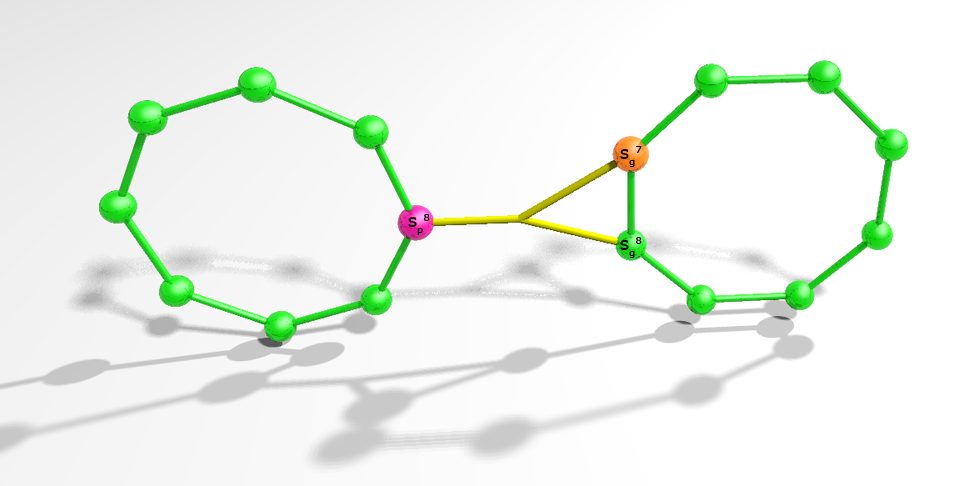
<style>
.page{position:relative;width:965px;height:486px;background:#ffffff}
.page>*{position:absolute;margin:0}
.t1{font:18px "Verdana";color:#000000}
</style>
<div class="page">
<p class="t1" style="left:620px;top:146px;width:22px;height:21px">sg7</p>
<p class="t1" style="left:408px;top:214px;width:22px;height:21px">sp8</p>
<p class="t1" style="left:620px;top:237px;width:22px;height:21px">sg8</p>
</div>
